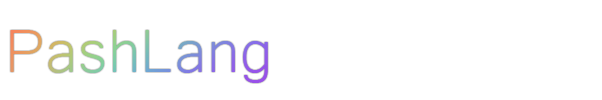
<style>
.page{position:relative;width:602px;height:100px;background:#ffffff}
.page>*{position:absolute;margin:0}
.t1{font:79.2px "Microsoft-Yi-Baiti"}
</style>
<div class="page">
<p class="t1" style="left:10px;top:30px;width:258px;height:53px">PashLang</p>
</div>
